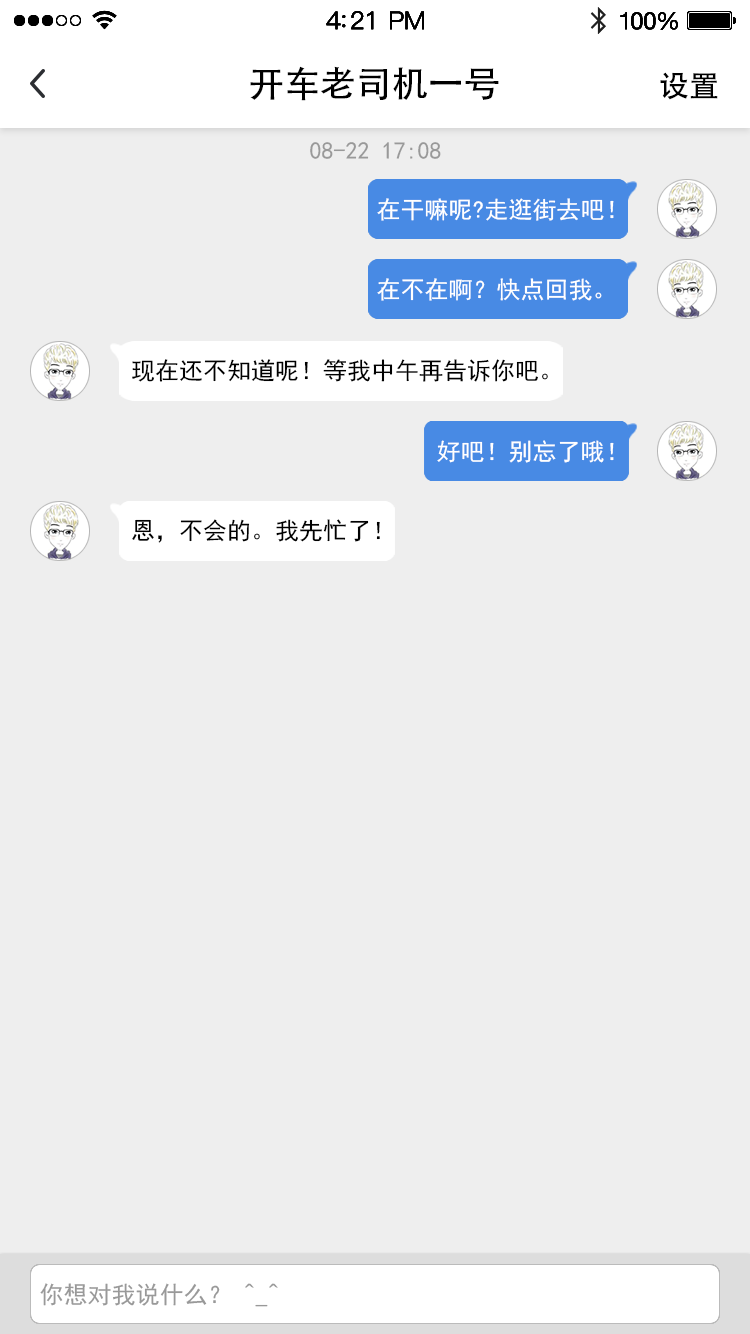
<style>
.page{position:relative;width:750px;height:1334px;background:#eeeeee}
.page>*{position:absolute;margin:0}
.t1{font:36px "AdobeHeitiStd-Regular";color:#000000}
.t2{font:30px "AdobeHeitiStd-Regular";color:#000000}
.t3{font:24px "SimHei";color:#999999}
.t4{font:24px "SimHei";color:#ffffff}
.t5{font:24px "SimHei";color:#000000}
</style>
<div class="page">
<p class="t1" style="left:250px;top:66px;width:249px;height:35px">开车老司机一号</p>
<p class="t2" style="left:660px;top:72px;width:58px;height:28px">设置</p>
<p class="t3" style="left:310px;top:142px;width:131px;height:17px">08-22 17:08</p>
<p class="t4" style="left:377px;top:198px;width:237px;height:23px">在干嘛呢?走逛街去吧！</p>
<p class="t4" style="left:377px;top:278px;width:225px;height:23px">在不在啊？快点回我。</p>
<p class="t5" style="left:132px;top:359px;width:416px;height:23px">现在还不知道呢！等我中午再告诉你吧。</p>
<p class="t4" style="left:437px;top:440px;width:177px;height:23px">好吧！别忘了哦！</p>
<p class="t5" style="left:132px;top:519px;width:248px;height:24px">恩，不会的。我先忙了！</p>
<p class="t3" style="left:40px;top:1283px;width:238px;height:24px">你想对我说什么？ ^_^</p>
</div>
